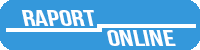
<style>
.page{position:relative;width:200px;height:50px;background:#3498db}
.page>*{position:absolute;margin:0}
.t1{font:22.9px "BebasNeue";color:#ffffff;scale:1.37 1}
.t2{font:23px "BebasNeue";color:#ffffff;scale:1.36 1}
</style>
<div class="page">
<p class="t1" style="left:21px;top:10px;width:73px;height:16px">RapoRt</p>
<p class="t2" style="left:107px;top:30px;width:69px;height:16px">ONLINE</p>
</div>
